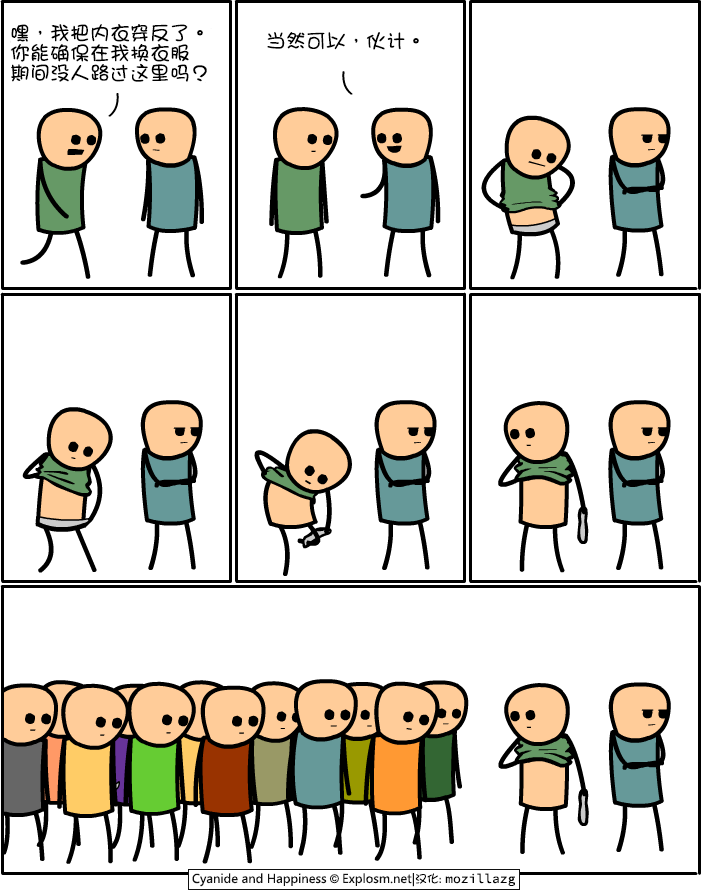
<style>
.page{position:relative;width:701px;height:891px;background:#ffffff}
.page>*{position:absolute;margin:0}
.t1{font:20px/20px "DFGirl";color:#000000}
.t2{font:20px "DFGirl";color:#000000}
</style>
<div class="page">
<p class="t1" style="left:10px;top:24px;width:197px;height:58px">嘿，我把内衣穿反了。<br>你能确保在我换衣服<br>期间没人路过这里吗？</p>
<p class="t2" style="left:267px;top:32px;width:152px;height:18px">当然可以，伙计。</p>
</div>
